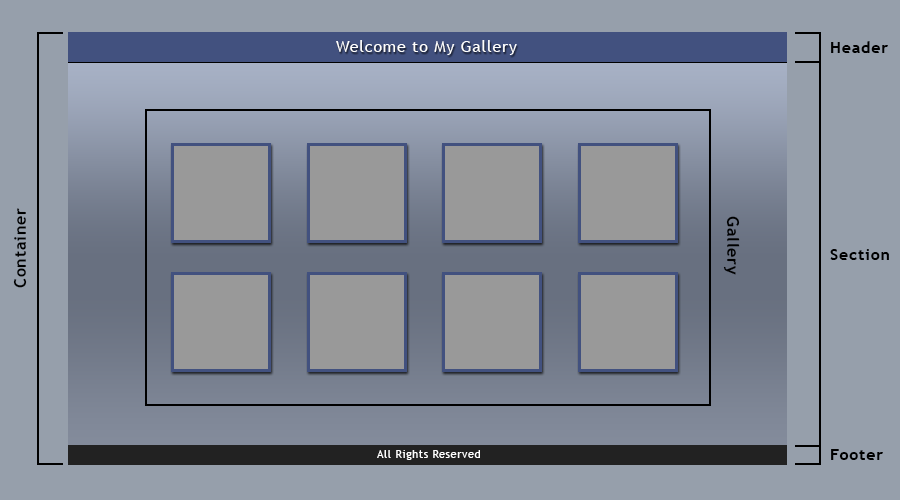
<style>
.page{position:relative;width:900px;height:500px;background:#969fab}
.page>*{position:absolute;margin:0}
.t1{font:16px "TrebuchetMS";letter-spacing:0.05em;color:#ffffff}
.t2{font:16px "TrebuchetMS-Bold";letter-spacing:0.05em;color:#000000}
.t3{font:16.1px "TrebuchetMS-Bold";letter-spacing:0.05em;color:#000000}
.t4{font:11px "TrebuchetMS";letter-spacing:0.05em;color:#ffffff}
</style>
<div class="page">
<p class="t1" style="left:336px;top:40px;width:181px;height:15px">Welcome to My Gallery</p>
<p class="t2" style="left:831px;top:41px;width:57px;height:12px">Header</p>
<p class="t3" style="left:13px;top:208px;width:14px;height:80px;rotate:-90deg">Container</p>
<p class="t2" style="left:723px;top:216px;width:17px;height:59px;rotate:90deg">Gallery</p>
<p class="t2" style="left:830px;top:249px;width:59px;height:11px">Section</p>
<p class="t2" style="left:831px;top:449px;width:52px;height:11px">Footer</p>
<p class="t4" style="left:377px;top:450px;width:103px;height:10px">All Rights Reserved</p>
</div>
